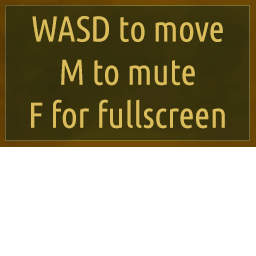
<style>
.page{position:relative;width:256px;height:256px;background:#ffffff}
.page>*{position:absolute;margin:0}
.t1{font:36px "UbuntuCondensed-Regular";color:#dabc5a}
</style>
<div class="page">
<p class="t1" style="left:31px;top:16px;width:194px;height:113px;text-align:center">WASD to move<br>M to mute<br>F for fullscreen</p>
</div>
